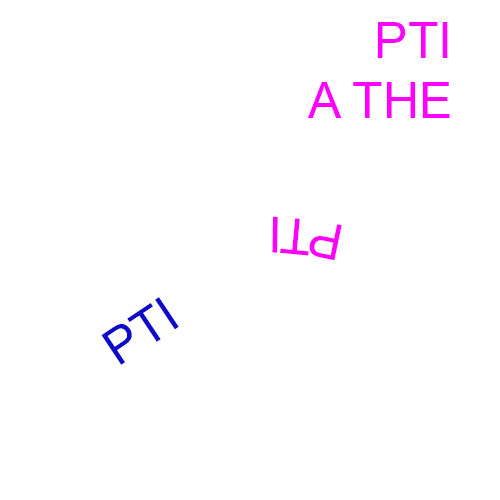
<style>
.page{position:relative;width:500px;height:500px;background:#ffffff}
.page>*{position:absolute;margin:0}
.t1{font:50px "ArialMT";color:#ff00ff}
.t2{font:50px "ArialMT";color:#0f0aca}
</style>
<div class="page">
<p class="t1" style="left:308px;top:22px;width:142px;height:96px;text-align:right">PTI<br>A THE</p>
<p class="t1" style="left:272px;top:216px;width:70px;height:45px">PTI</p>
<p class="t2" style="left:101px;top:297px;width:78px;height:68px;rotate:-34deg">PTI</p>
</div>
